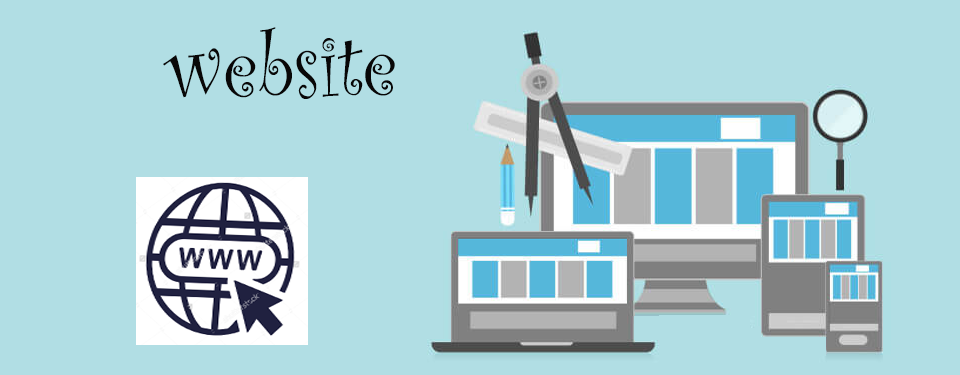
<style>
.page{position:relative;width:960px;height:375px;background:#b1dee4}
.page>*{position:absolute;margin:0}
.t1{font:89.7px "CurlzMT";color:#080707;scale:0.93 1}
</style>
<div class="page">
<p class="t1" style="left:163px;top:27px;width:232px;height:72px;rotate:-1deg">website</p>
</div>
